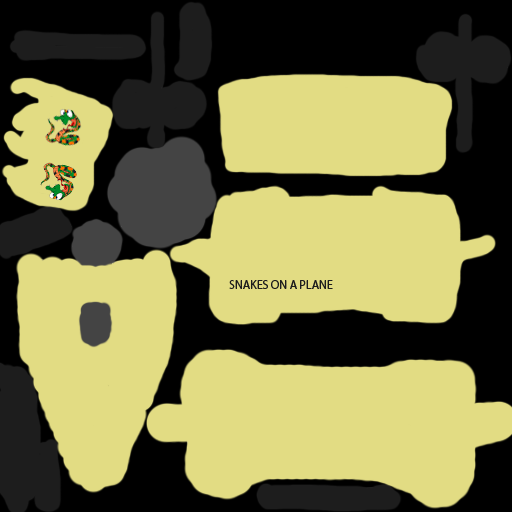
<style>
.page{position:relative;width:512px;height:512px;background:#e2dc83}
.page>*{position:absolute;margin:0}
.t1{font:12px "MyriadPro-Regular";color:#1d1d1d}
</style>
<div class="page">
<p class="t1" style="left:229px;top:280px;width:104px;height:9px">SNAKES ON A PLANE</p>
</div>
